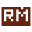
<style>
.page{position:relative;width:32px;height:32px;background:#ffffff}
.page>*{position:absolute;margin:0}
.t1{font:19.1px "Pixel-Bit-Advanced";letter-spacing:0.05em;color:#63250f}
</style>
<div class="page">
<p class="t1" style="left:1px;top:7px;width:15px;height:19px">R</p>
<p class="t1" style="left:13px;top:7px;width:18px;height:19px">M</p>
</div>
